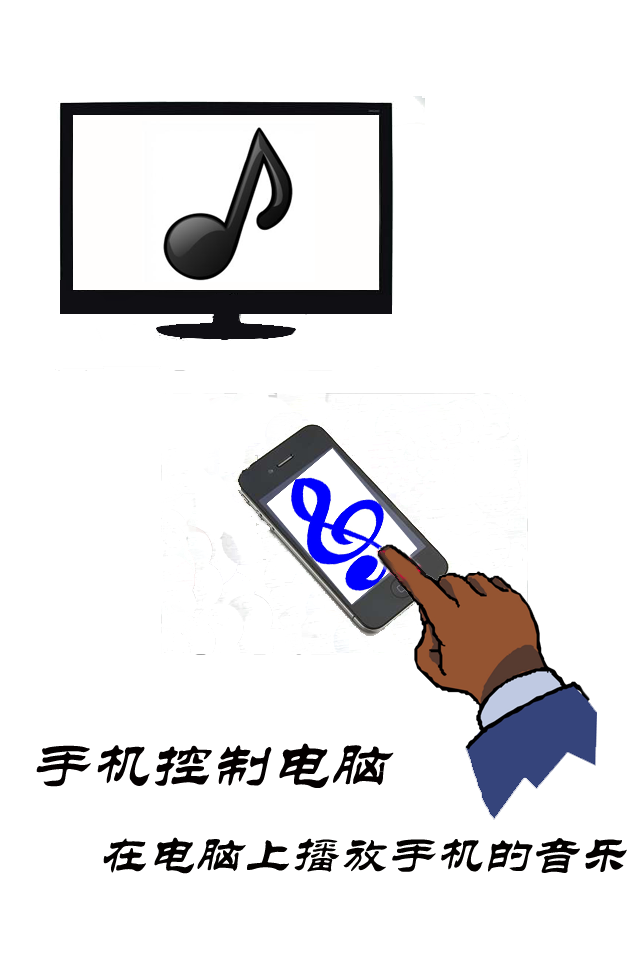
<style>
.page{position:relative;width:640px;height:960px;background:#ffffff}
.page>*{position:absolute;margin:0}
.t1{font:60px "STLiti";color:#040000;font-style:italic}
.t2{font:48px "STLiti";color:#030100;font-style:italic}
</style>
<div class="page">
<p class="t1" style="left:36px;top:743px;width:358px;height:45px">手机控制电脑</p>
<p class="t2" style="left:103px;top:837px;width:524px;height:37px">在电脑上播放手机的音乐</p>
</div>
